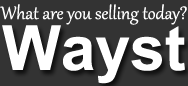
<style>
.page{position:relative;width:188px;height:86px;background:#333333}
.page>*{position:absolute;margin:0}
.t1{font:22px "Gabriola";color:#ffffff}
.t2{font:87px "Utsaah-Bold";color:#ffffff}
</style>
<div class="page">
<p class="t1" style="left:0px;top:4px;width:187px;height:21px">What are you selling today?</p>
<p class="t2" style="left:2px;top:25px;width:183px;height:59px">Wayst</p>
</div>
